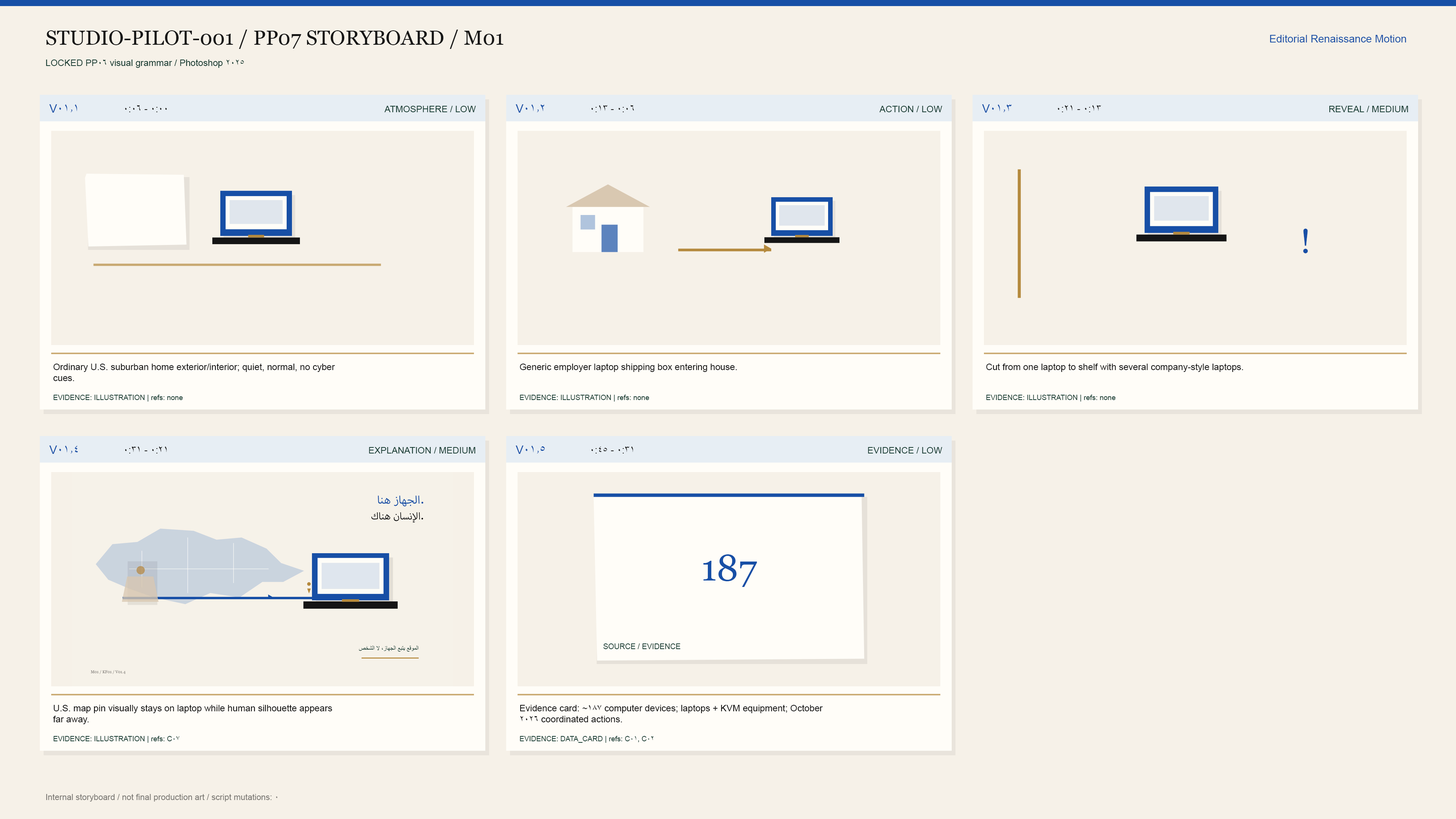
<style>
.page{position:relative;width:1456px;height:819px;background:#f6f1e8}
.page>*{position:absolute;margin:0}
.t1{font:20.5px "Georgia";color:#151515}
.t2{font:10.6px "ArialMT";color:#174fa6}
.t3{font:9.1px "ArialMT";color:#173c32}
.t4{font:11.8px "ArialMT";color:#174fa6}
.t5{font:9.9px "ArialMT";color:#151515}
.t6{font:34.1px "Georgia";color:#174fa6}
.t7{font:9.1px "ArialMT";color:#151515}
.t8{font:7.2px "ArialMT";color:#173c32}
.t9{font:36.4px "Georgia";color:#174fa6}
.t10{font:7.6px "ArialMT";color:#173c32}
.t11{font:8.3px "ArialMT";color:#7b7974}
</style>
<div class="page">
<p class="t1" style="left:46px;top:30px;width:458px;height:19px">STUDIO-PILOT-001 / PP07 STORYBOARD / M01</p>
<p class="t2" style="left:1270px;top:35px;width:136px;height:7px">Editorial Renaissance Motion</p>
<p class="t3" style="left:46px;top:59px;width:198px;height:9px">LOCKED PP06 visual grammar / Photoshop 2025</p>
<p class="t4" style="left:49px;top:104px;width:28px;height:9px">V01.1</p>
<p class="t5" style="left:125px;top:105px;width:42px;height:7px">0:00 - 0:06</p>
<p class="t3" style="left:384px;top:106px;width:92px;height:6px">ATMOSPHERE / LOW</p>
<p class="t4" style="left:516px;top:104px;width:28px;height:9px">V01.2</p>
<p class="t5" style="left:591px;top:105px;width:43px;height:7px">0:06 - 0:13</p>
<p class="t3" style="left:879px;top:106px;width:63px;height:6px">ACTION / LOW</p>
<p class="t4" style="left:982px;top:104px;width:30px;height:9px">V01.3</p>
<p class="t5" style="left:1057px;top:105px;width:44px;height:7px">0:13 - 0:21</p>
<p class="t3" style="left:1329px;top:106px;width:79px;height:6px">REVEAL / MEDIUM</p>
<p class="t6" style="left:1303px;top:229px;width:5px;height:24px">!</p>
<p class="t7" style="left:53px;top:363px;width:282px;height:18px">Ordinary U.S. suburban home exterior/interior; quiet, normal, no cyber<br>cues.</p>
<p class="t7" style="left:520px;top:363px;width:217px;height:9px">Generic employer laptop shipping box entering house.</p>
<p class="t7" style="left:986px;top:363px;width:257px;height:9px">Cut from one laptop to shelf with several company-style laptops.</p>
<p class="t8" style="left:53px;top:395px;width:130px;height:7px">EVIDENCE: ILLUSTRATION | refs: none</p>
<p class="t8" style="left:520px;top:395px;width:129px;height:7px">EVIDENCE: ILLUSTRATION | refs: none</p>
<p class="t8" style="left:986px;top:395px;width:129px;height:7px">EVIDENCE: ILLUSTRATION | refs: none</p>
<p class="t4" style="left:49px;top:446px;width:29px;height:8px">V01.4</p>
<p class="t5" style="left:125px;top:446px;width:42px;height:7px">0:21 - 0:31</p>
<p class="t3" style="left:369px;top:447px;width:106px;height:6px">EXPLANATION / MEDIUM</p>
<p class="t4" style="left:516px;top:446px;width:29px;height:8px">V01.5</p>
<p class="t5" style="left:591px;top:446px;width:42px;height:7px">0:31 - 0:45</p>
<p class="t3" style="left:868px;top:447px;width:74px;height:6px">EVIDENCE / LOW</p>
<p class="t9" style="left:703px;top:554px;width:54px;height:33px">187</p>
<p class="t10" style="left:603px;top:643px;width:78px;height:6px">SOURCE / EVIDENCE</p>
<p class="t7" style="left:53px;top:704px;width:279px;height:20px">U.S. map pin visually stays on laptop while human silhouette appears<br>far away.</p>
<p class="t7" style="left:520px;top:704px;width:303px;height:18px">Evidence card: ~187 computer devices; laptops + KVM equipment; October<br>2026 coordinated actions.</p>
<p class="t8" style="left:53px;top:736px;width:126px;height:7px">EVIDENCE: ILLUSTRATION | refs: C07</p>
<p class="t8" style="left:520px;top:736px;width:134px;height:7px">EVIDENCE: DATA_CARD | refs: C01, C02</p>
<p class="t11" style="left:46px;top:794px;width:232px;height:8px">Internal storyboard / not final production art / script mutations: 0</p>
</div>
